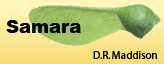
<style>
.page{position:relative;width:164px;height:64px}
.page>*{position:absolute;margin:0}
.t1{font:18px "Arial-Black";color:#000000}
.t2{font:11px "Myriad-Roman";color:#000000}
</style>
<div class="page">
<p class="t1" style="left:6px;top:20px;width:75px;height:13px">Samara</p>
<p class="t2" style="left:93px;top:51px;width:64px;height:8px">D.R. Maddison</p>
</div>
